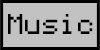
<style>
.page{position:relative;width:100px;height:50px;background:#c2c2c2}
.page>*{position:absolute;margin:0}
.t1{font:45.8px "Coder's-Crux";color:#000000}
</style>
<div class="page">
<p class="t1" style="left:8px;top:14px;width:85px;height:20px">Music</p>
</div>
